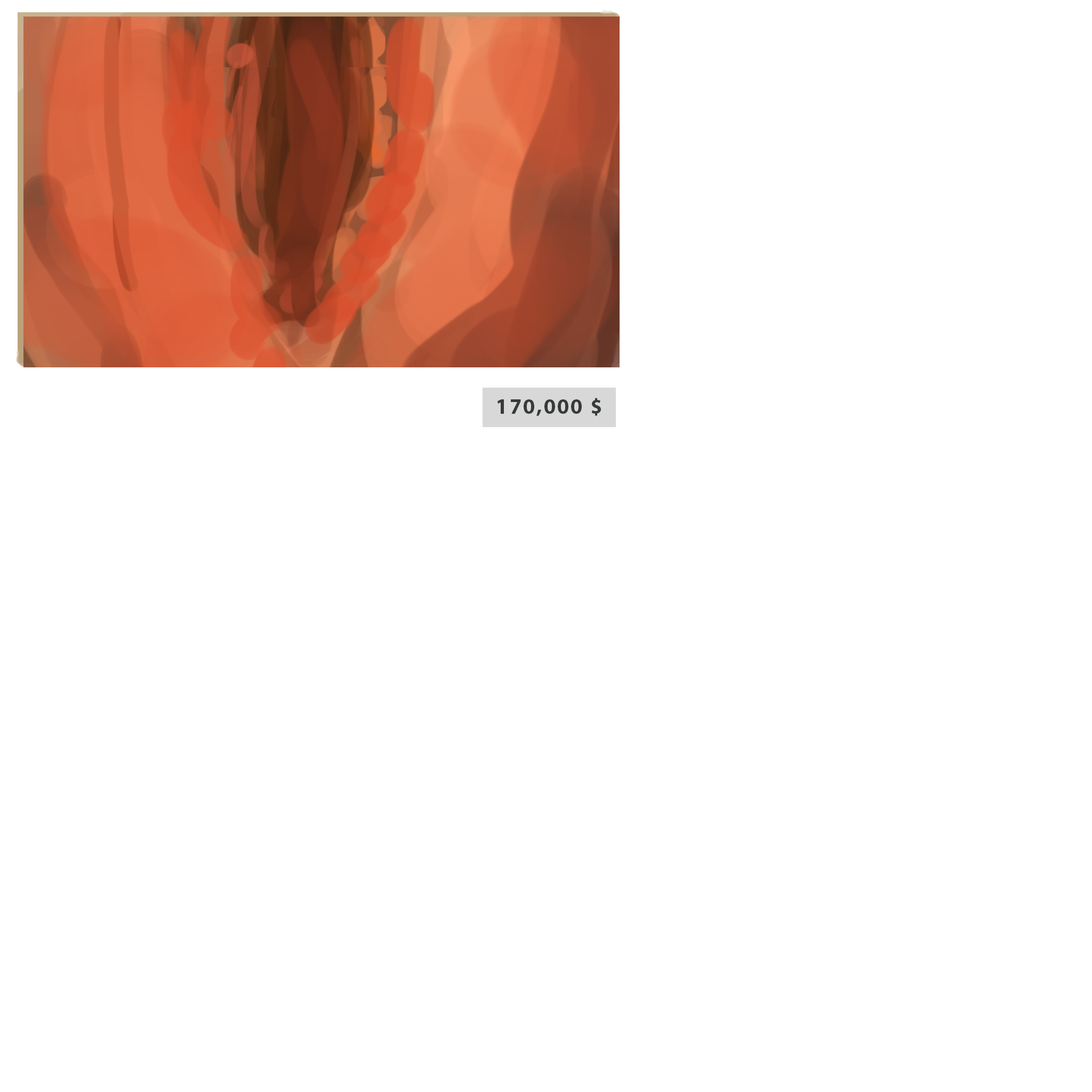
<style>
.page{position:relative;width:1092px;height:1092px;background:#ffffff}
.page>*{position:absolute;margin:0}
.t1{font:21.6px "MyriadPro-Bold";letter-spacing:0.075em;color:#373b38}
</style>
<div class="page">
<p class="t1" style="left:497px;top:398px;width:104px;height:18px">170,000 $</p>
</div>
